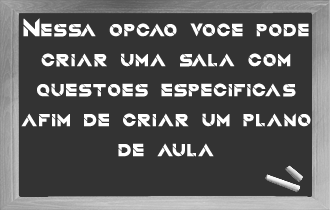
<style>
.page{position:relative;width:330px;height:210px;background:#333333}
.page>*{position:absolute;margin:0}
.t1{font:25px "QuantumRegular";color:#ffffff}
</style>
<div class="page">
<p class="t1" style="left:21px;top:18px;width:290px;height:139px;text-align:center">Nessa opcao você pode criar uma sala com questoes especificas afim de criar um plano de aula</p>
</div>
